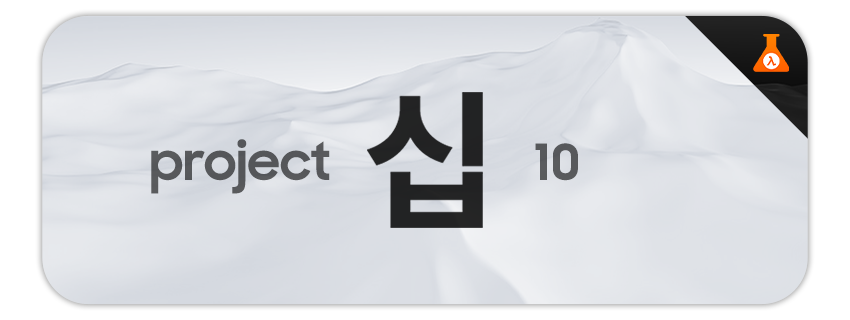
<style>
.page{position:relative;width:850px;height:320px}
.page>*{position:absolute;margin:0}
.t1{font:50px "SamsungSharpSans-Bold";letter-spacing:0.005em;color:#56575a}
.t2{font:50px "SamsungSharpSans-Bold";letter-spacing:0.005em;color:#58595c}
</style>
<div class="page">
<p class="t1" style="left:151px;top:139px;width:179px;height:55px">project</p>
<p class="t2" style="left:535px;top:143px;width:43px;height:38px">10</p>
</div>
